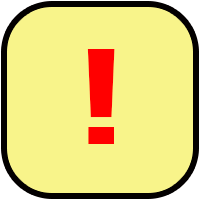
<style>
.page{position:relative;width:200px;height:200px;background:#f8f48a}
.page>*{position:absolute;margin:0}
.t1{font:130px "Verdana-Bold";color:#ff0000}
</style>
<div class="page">
<p class="t1" style="left:87px;top:49px;width:28px;height:95px">!</p>
</div>
